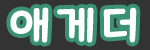
<style>
.page{position:relative;width:150px;height:50px;background:#333333}
.page>*{position:absolute;margin:0}
.t1{font:43.1px "MaplestoryLight";letter-spacing:0.12em;color:#ffffff;font-weight:bold}
</style>
<div class="page">
<p class="t1" style="left:10px;top:7px;width:127px;height:36px">애게더</p>
</div>
